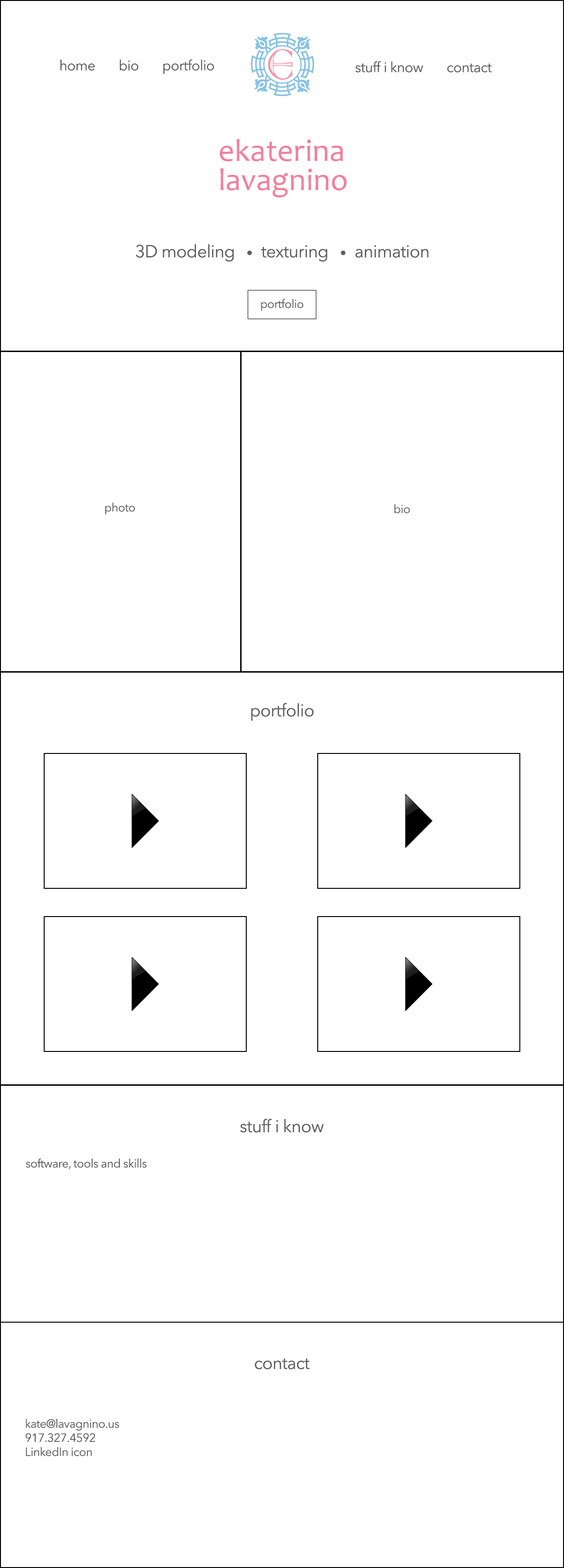
<style>
.page{position:relative;width:564px;height:1568px;background:#ffffff}
.page>*{position:absolute;margin:0}
.t1{font:14.1px "AvenirNext-Regular";letter-spacing:-0.025em;color:#5e5e5e}
.t2{font:17.4px "AvenirNext-Regular";letter-spacing:-0.025em;color:#5e5e5e}
.t3{font:12.7px "AvenirNext-Regular";letter-spacing:-0.025em;color:#5e5e5e}
.t4{font:11.8px "AvenirNext-Regular";letter-spacing:-0.025em;color:#5e5e5e}
</style>
<div class="page">
<p class="t1" style="left:60px;top:59px;width:154px;height:15px">home      bio      portfolio</p>
<p class="t1" style="left:355px;top:61px;width:137px;height:11px">stuff i know      contact</p>
<p class="t2" style="left:136px;top:244px;width:293px;height:18px">3D modeling   <span class="t3">•   </span>texturing   <span class="t3">•   </span>animation</p>
<p class="t4" style="left:261px;top:298px;width:43px;height:13px">portfolio</p>
<p class="t4" style="left:105px;top:502px;width:30px;height:13px">photo</p>
<p class="t4" style="left:394px;top:504px;width:16px;height:9px">bio</p>
<p class="t2" style="left:251px;top:703px;width:63px;height:18px">portfolio</p>
<p class="t2" style="left:240px;top:1119px;width:84px;height:14px">stuff i know</p>
<p class="t4" style="left:26px;top:1158px;width:121px;height:11px">software, tools and skills</p>
<p class="t2" style="left:255px;top:1358px;width:55px;height:12px">contact</p>
<p class="t4" style="left:25px;top:1419px;width:94px;height:37px">kate@lavagnino.us<br>917.327.4592<br>LinkedIn icon</p>
</div>
